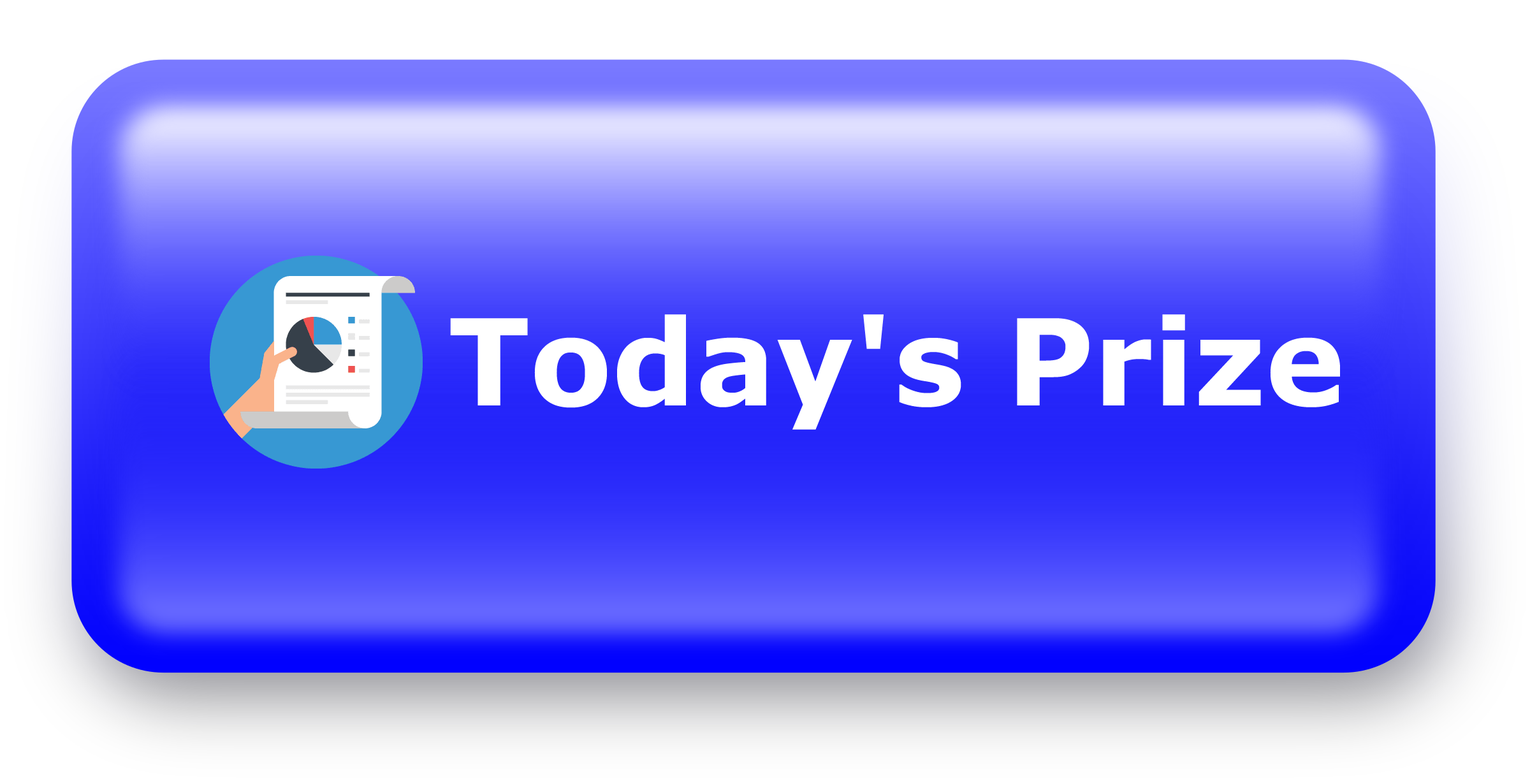
<style>
.page{position:relative;width:1530px;height:779px}
.page>*{position:absolute;margin:0}
.t1{font:119.9px "Verdana-Bold";color:#ffffff}
.t2{font:91.8px "Verdana-Bold";color:#000000}
</style>
<div class="page">
<p class="t1" style="left:121px;top:314px;width:1270px;height:218px;text-align:center"><span class="t2">         </span>Today's Prize</p>
</div>
